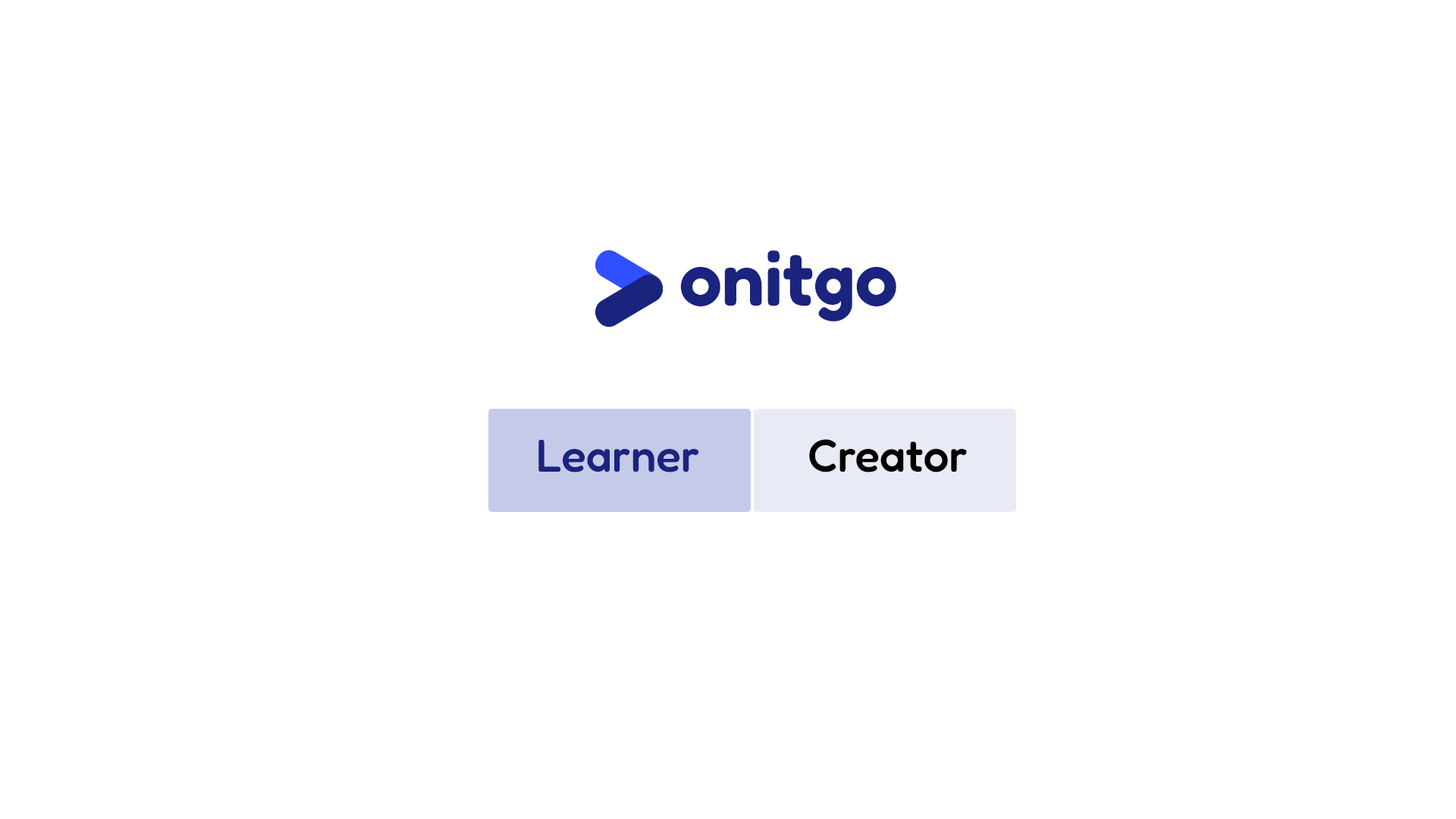
<style>
.page{position:relative;width:1456px;height:819px;background:#ffffff}
.page>*{position:absolute;margin:0}
.t1{font:75.8px "Fredoka-SemiBold";color:#1a237e}
.t2{font:45.5px "Fredoka-Medium";color:#1a237e}
.t3{font:45.5px "Fredoka-Medium";color:#000000}
</style>
<div class="page">
<p class="t1" style="left:680px;top:250px;width:216px;height:72px">onitgo</p>
<p class="t2" style="left:538px;top:440px;width:160px;height:32px">Learner</p>
<p class="t3" style="left:809px;top:439px;width:158px;height:33px">Creator</p>
</div>
